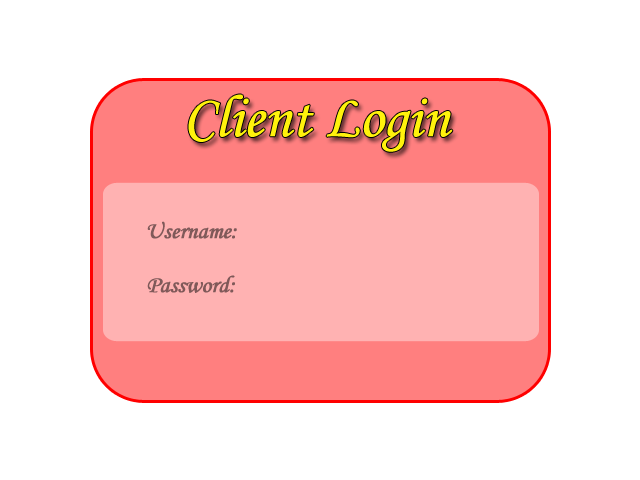
<style>
.page{position:relative;width:640px;height:480px;background:#ffffff}
.page>*{position:absolute;margin:0}
.t1{font:60px "MonotypeCorsiva";letter-spacing:-0.025em;color:#ffff00;font-weight:bold}
.t2{font:24px "MonotypeCorsiva";letter-spacing:-0.025em;color:#7f5959;font-weight:bold}
</style>
<div class="page">
<p class="t1" style="left:188px;top:94px;width:265px;height:58px">Client Login</p>
<p class="t2" style="left:147px;top:221px;width:90px;height:18px">Username:</p>
<p class="t2" style="left:147px;top:275px;width:88px;height:18px">Password:</p>
</div>
